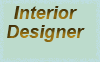
<style>
.page{position:relative;width:100px;height:62px;background:#bcdbcc}
.page>*{position:absolute;margin:0}
.t1{font:18px "Arial-BoldItalicMT"}
</style>
<div class="page">
<p class="t1" style="left:14px;top:6px;width:64px;height:13px">Interior</p>
<p class="t1" style="left:7px;top:25px;width:78px;height:17px">Designer</p>
</div>
